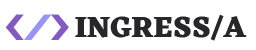
<style>
.page{position:relative;width:256px;height:50px;background:#ffffff}
.page>*{position:absolute;margin:0}
.t1{font:40px "SquareOne-Bold";color:#845abf}
.t2{font:40px "SquareOne-Bold";color:#9794f2}
.t3{font:30px "Eczar-ExtraBold";color:#27272a}
</style>
<div class="page">
<p class="t1" style="left:5px;top:14px;width:64px;height:26px">&lt;<span class="t2">/</span>&gt;</p>
<p class="t3" style="left:75px;top:14px;width:172px;height:27px">INGRESS/A</p>
</div>
